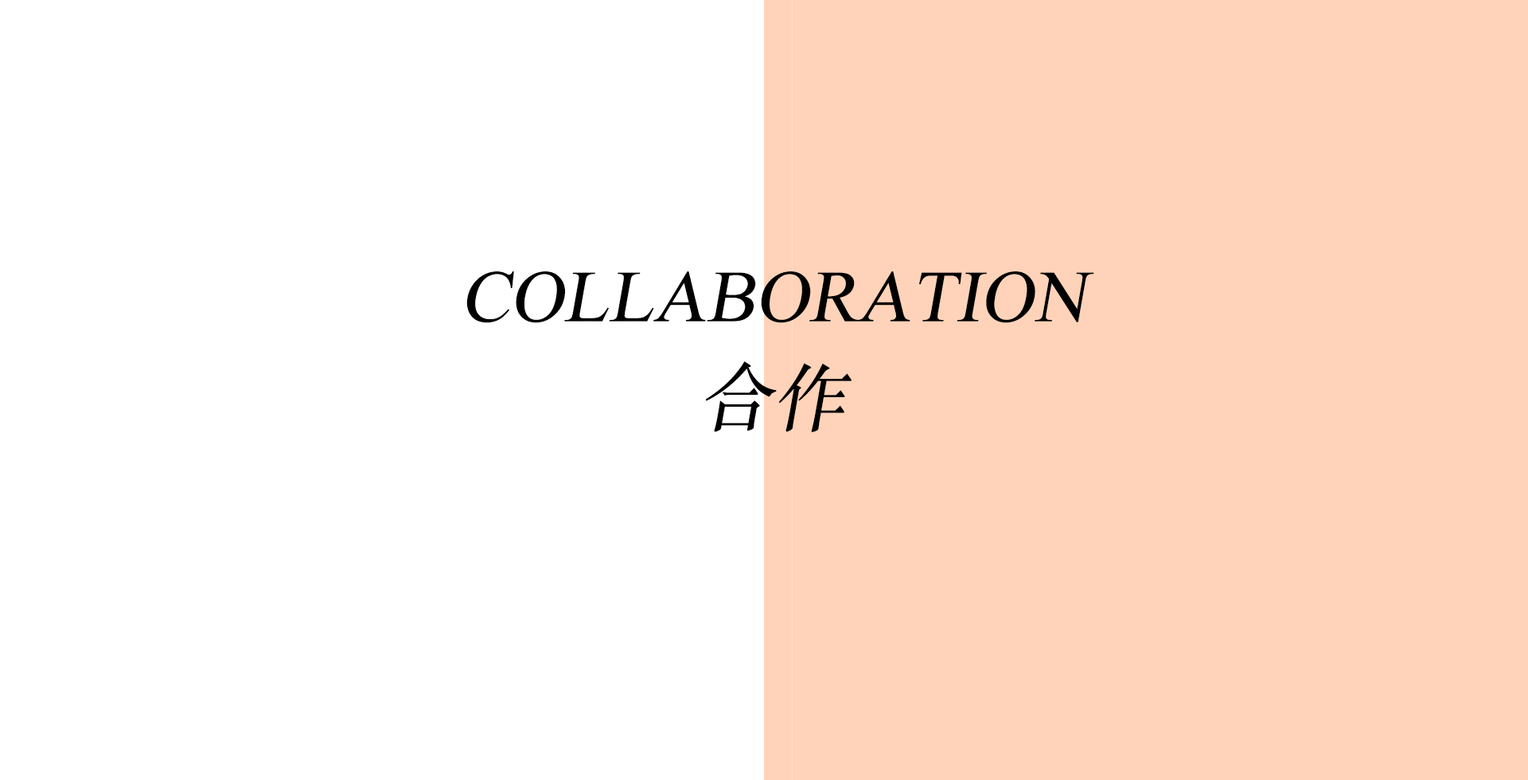
<style>
.page{position:relative;width:1528px;height:780px;background:#ffffff}
.page>*{position:absolute;margin:0}
.t1{font:73.6px "TimesNewRomanPSMT";color:#000000;font-style:italic}
.t2{font:73.6px "STSongti-SC-Regular";color:#000000;font-style:italic}
</style>
<div class="page">
<p class="t1" style="left:466px;top:271px;width:629px;height:161px;text-align:center">COLLABORATION<br><span class="t2">合作</span></p>
</div>
